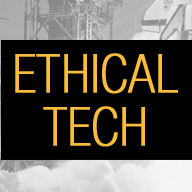
<style>
.page{position:relative;width:192px;height:192px;background:#000000}
.page>*{position:absolute;margin:0}
.t1{font:53.2px/52.5px "HelveticaNeueLTStd-ThCn";color:#fbbd39;text-transform:uppercase;font-weight:bold}
</style>
<div class="page">
<p class="t1" style="left:15px;top:53px;width:163px;height:94px;text-align:center">Ethical<br>Tech</p>
</div>
